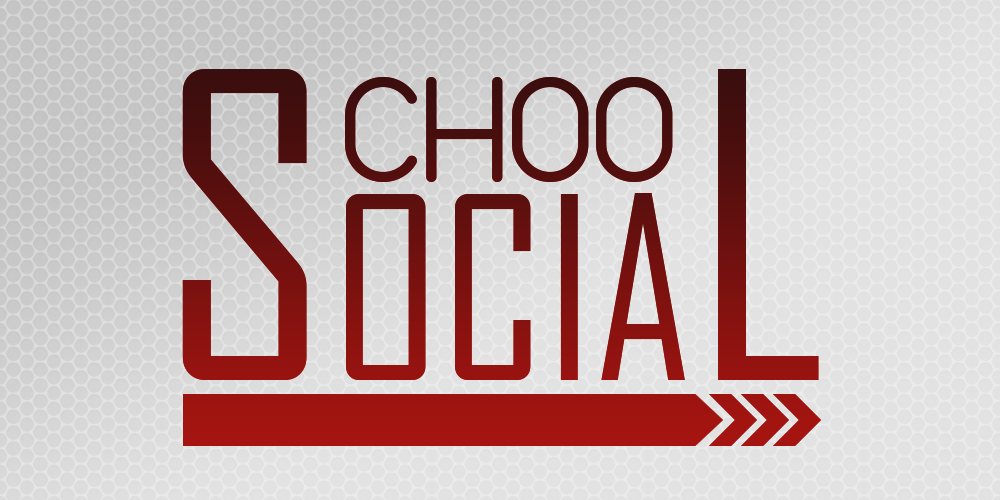
<style>
.page{position:relative;width:1000px;height:500px}
.page>*{position:absolute;margin:0}
.t1{font:244px "AgencyFB-Reg"}
.t2{font:406.6px "AgencyFB-Reg"}
.t3{font:162.6px "Arista2.0Light";color:#470e0e}
</style>
<div class="page">
<p class="t1" style="left:182px;top:69px;width:637px;height:311px"><span class="t2">S</span>OCIA<span class="t2">L</span></p>
<p class="t3" style="left:345px;top:77px;width:328px;height:105px">CHOO</p>
</div>
